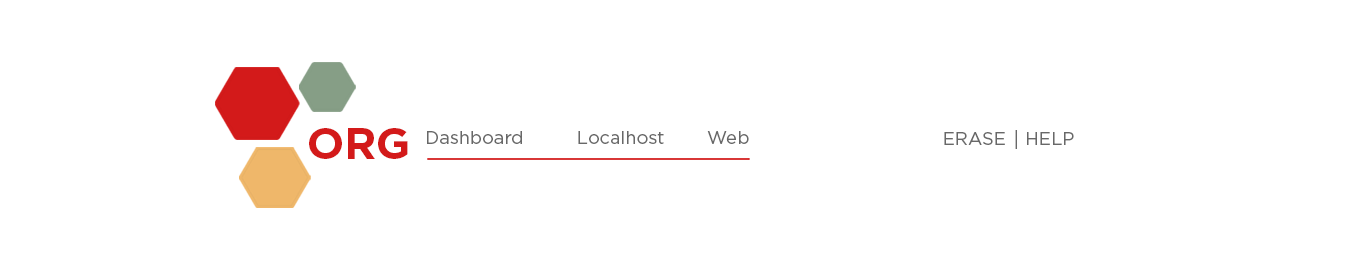
<style>
.page{position:relative;width:1366px;height:259px;background:#ffffff}
.page>*{position:absolute;margin:0}
.t1{font:43.6px "GothamPro-Bold";color:#d31a1a}
.t2{font:18px "GothamPro";color:#686868}
.t3{font:19.4px "GothamPro";color:#686868}
</style>
<div class="page">
<p class="t1" style="left:309px;top:128px;width:99px;height:31px">ORG</p>
<p class="t2" style="left:427px;top:131px;width:95px;height:13px">Dashboard</p>
<p class="t2" style="left:578px;top:131px;width:86px;height:13px">Localhost</p>
<p class="t2" style="left:707px;top:131px;width:42px;height:13px">Web</p>
<p class="t2" style="left:944px;top:132px;width:61px;height:13px">ERASE</p>
<p class="t3" style="left:1015px;top:130px;width:2px;height:19px">|</p>
<p class="t2" style="left:1027px;top:132px;width:47px;height:13px">HELP</p>
</div>
